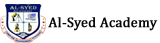
<style>
.page{position:relative;width:160px;height:43px;background:#ffffff}
.page>*{position:absolute;margin:0}
.t1{font:14px "Cambria";color:#070807;font-weight:bold}
</style>
<div class="page">
<p class="t1" style="left:48px;top:17px;width:110px;height:14px">Al-Syed Academy</p>
</div>
